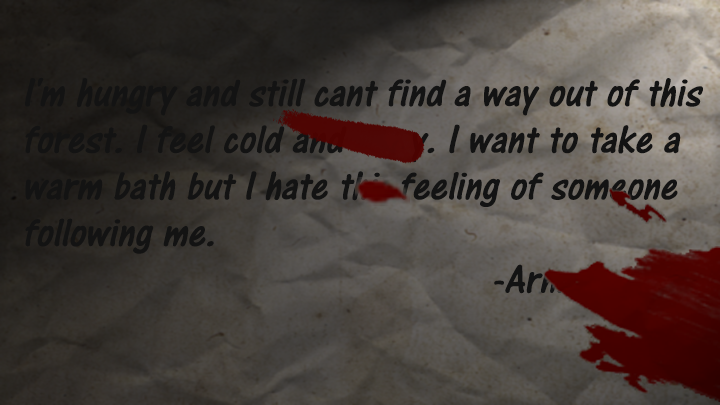
<style>
.page{position:relative;width:720px;height:405px}
.page>*{position:absolute;margin:0}
.t1{font:42.6px/46.6px "ARCENA";color:#131313;font-style:italic}
</style>
<div class="page">
<p class="t1" style="left:25px;top:77px;width:678px;height:217px">I'm hungry and still cant find a way out of this <br>forest. I feel cold and      y. I want to take a <br>warm bath but I hate thi  feeling of someone <br>following me. <br>             -Arm</p>
</div>
